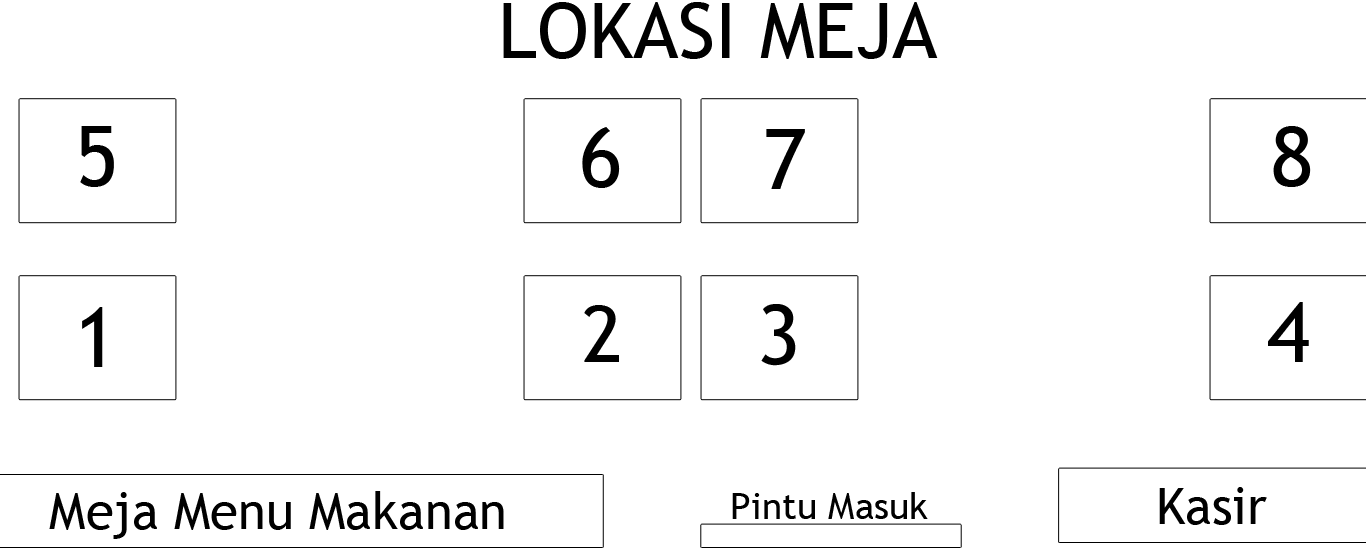
<style>
.page{position:relative;width:1366px;height:550px;background:#ffffff}
.page>*{position:absolute;margin:0}
.t1{font:76.9px "TrebuchetMS";color:#000000}
.t2{font:83.2px "TrebuchetMS";color:#000000}
.t3{font:78.3px "TrebuchetMS";color:#000000}
.t4{font:51px "TrebuchetMS";color:#000000}
.t5{font:37.2px "TrebuchetMS";color:#000000}
.t6{font:50.6px "TrebuchetMS";color:#000000}
</style>
<div class="page">
<p class="t1" style="left:503px;top:2px;width:435px;height:57px">LOKASI MEJA</p>
<p class="t2" style="left:80px;top:126px;width:34px;height:61px">5</p>
<p class="t2" style="left:1273px;top:126px;width:38px;height:61px">8</p>
<p class="t2" style="left:582px;top:127px;width:38px;height:61px">6</p>
<p class="t2" style="left:766px;top:129px;width:39px;height:60px">7</p>
<p class="t3" style="left:584px;top:305px;width:35px;height:57px">2</p>
<p class="t2" style="left:761px;top:304px;width:35px;height:62px;rotate:-2deg">3</p>
<p class="t2" style="left:1268px;top:302px;width:41px;height:60px">4</p>
<p class="t2" style="left:82px;top:307px;width:21px;height:60px">1</p>
<p class="t4" style="left:49px;top:491px;width:455px;height:48px">Meja Menu Makanan</p>
<p class="t5" style="left:732px;top:492px;width:196px;height:27px">Pintu Masuk</p>
<p class="t6" style="left:1159px;top:487px;width:108px;height:38px">Kasir</p>
</div>
